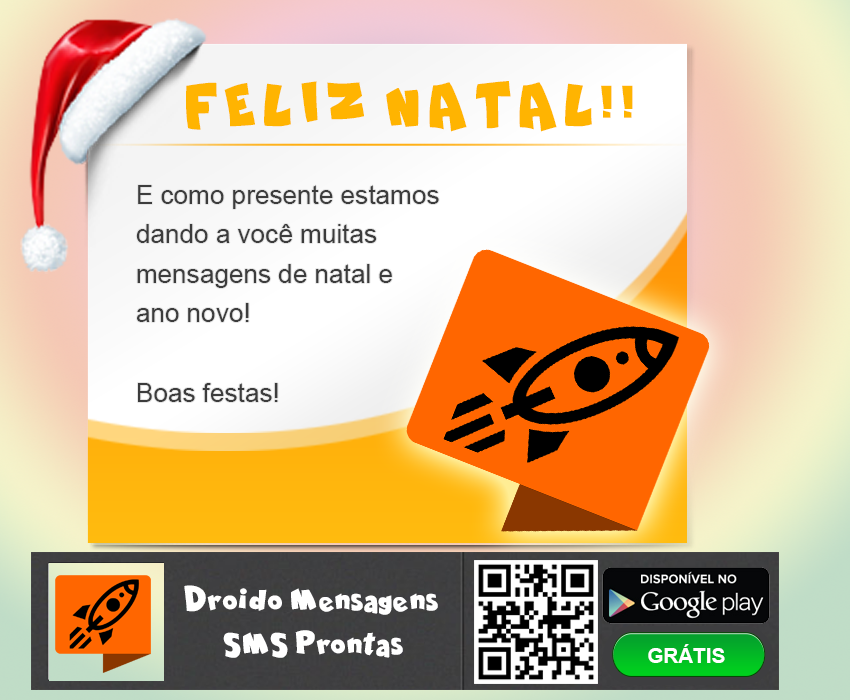
<style>
.page{position:relative;width:850px;height:700px}
.page>*{position:absolute;margin:0}
.t1{font:59.5px "ComicaBD-Bold";letter-spacing:0.05em;color:#ffb401;scale:0.94 1}
.t2{font:26.1px/24px "ArialMT";color:#3c3c3c}
.t3{font:32.4px "ComicaBD-Bold";color:#ffffff}
.t4{font:20.8px "Arial-BoldMT";color:#ffffff}
</style>
<div class="page">
<p class="t1" style="left:186px;top:81px;width:447px;height:51px">FELIZ NATAL!!</p>
<p class="t2" style="left:136px;top:185px;width:303px;height:217px">E como presente estamos<br>dando a você muitas <br>mensagens de natal e <br>ano novo!<br><br>Boas festas!</p>
<p class="t3" style="left:184px;top:585px;width:254px;height:73px;text-align:center">Droido Mensagens <br>SMS Prontas</p>
<p class="t4" style="left:648px;top:644px;width:77px;height:19px">GRÁTIS</p>
</div>
